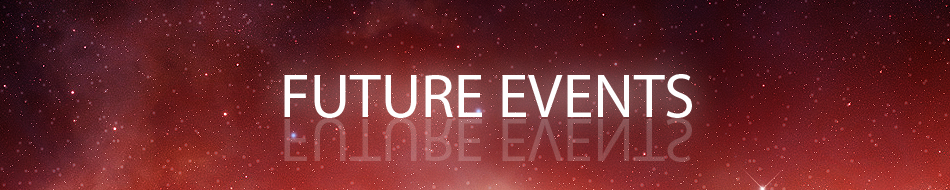
<style>
.page{position:relative;width:950px;height:190px}
.page>*{position:absolute;margin:0}
.t1{font:61.8px "MyriadPro-Regular";color:#fefefe}
.t2{font:61.8px "MyriadPro-Regular";color:#9d5658}
</style>
<div class="page">
<p class="t1" style="left:284px;top:74px;width:408px;height:44px">FUTURE EVENTS</p>
<p class="t2" style="left:284px;top:118px;width:408px;height:44px">FUTURE EVENTS</p>
</div>
